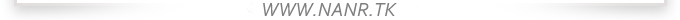
<style>
.page{position:relative;width:680px;height:20px;background:#ffffff}
.page>*{position:absolute;margin:0}
.t1{font:20px "Corbel-Italic";color:#7f7f7f;text-transform:uppercase}
</style>
<div class="page">
<p class="t1" style="left:263px;top:3px;width:134px;height:13px">www.nanr.tk</p>
</div>
